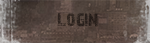
<style>
.page{position:relative;width:150px;height:43px}
.page>*{position:absolute;margin:0}
.t1{font:18.6px "28DaysLater";color:#28201c}
</style>
<div class="page">
<p class="t1" style="left:57px;top:13px;width:41px;height:14px">Login</p>
</div>
